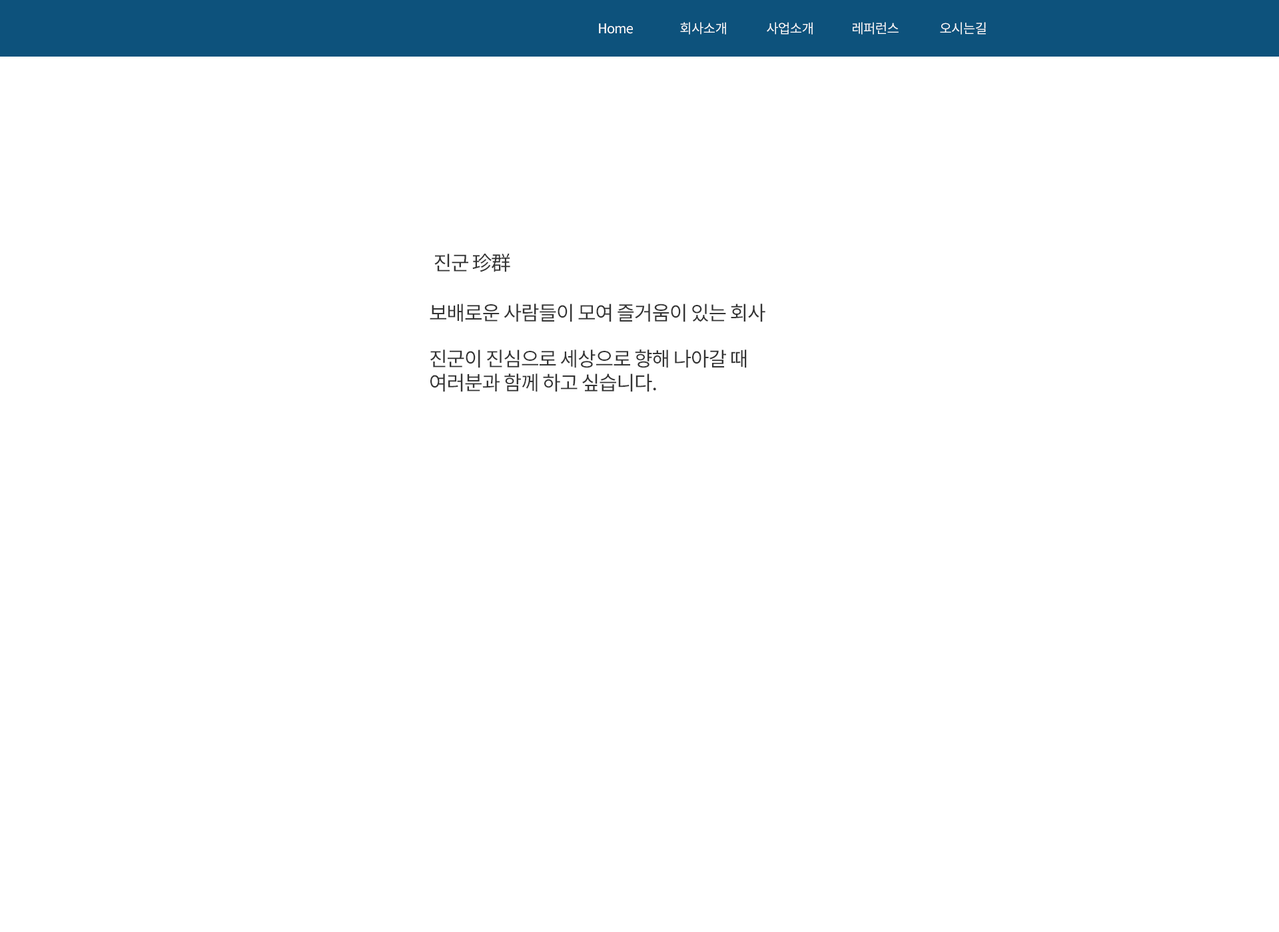
<style>
.page{position:relative;width:1279px;height:932px;background:#ffffff}
.page>*{position:absolute;margin:0}
.t1{font:13.3px "NotoSansCJKkr-Regular";letter-spacing:-0.05em;color:#ffffff}
.t2{font:20px "NotoSansCJKkr-Regular";letter-spacing:-0.05em;color:#333333}
</style>
<div class="page">
<p class="t1" style="left:599px;top:23px;width:34px;height:11px">Home</p>
<p class="t1" style="left:680px;top:22px;width:46px;height:13px">회사소개</p>
<p class="t1" style="left:767px;top:22px;width:46px;height:13px">사업소개</p>
<p class="t1" style="left:853px;top:22px;width:45px;height:13px">레퍼런스</p>
<p class="t1" style="left:940px;top:22px;width:46px;height:13px">오시는길</p>
<p class="t2" style="left:434px;top:254px;width:34px;height:18px">진군</p>
<p class="t2" style="left:472px;top:253px;width:38px;height:19px">珍群</p>
<p class="t2" style="left:430px;top:304px;width:335px;height:18px">보배로운 사람들이 모여 즐거움이 있는 회사</p>
<p class="t2" style="left:430px;top:350px;width:317px;height:42px">진군이 진심으로 세상으로 향해 나아갈 때<br>여러분과 함께 하고 싶습니다.</p>
</div>
